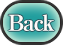
<style>
.page{position:relative;width:63px;height:45px}
.page>*{position:absolute;margin:0}
.t1{font:22px "RyuminPro-ExBold";letter-spacing:-0.08em;color:#fdfbf9}
</style>
<div class="page">
<p class="t1" style="left:8px;top:14px;width:47px;height:17px">Back</p>
</div>
